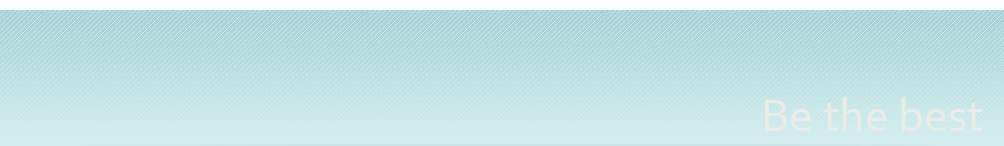
<style>
.page{position:relative;width:1004px;height:146px}
.page>*{position:absolute;margin:0}
.t1{font:48px "Corbel";color:#edece6}
</style>
<div class="page">
<p class="t1" style="left:765px;top:97px;width:218px;height:34px;opacity:0.9">Be the best</p>
</div>
